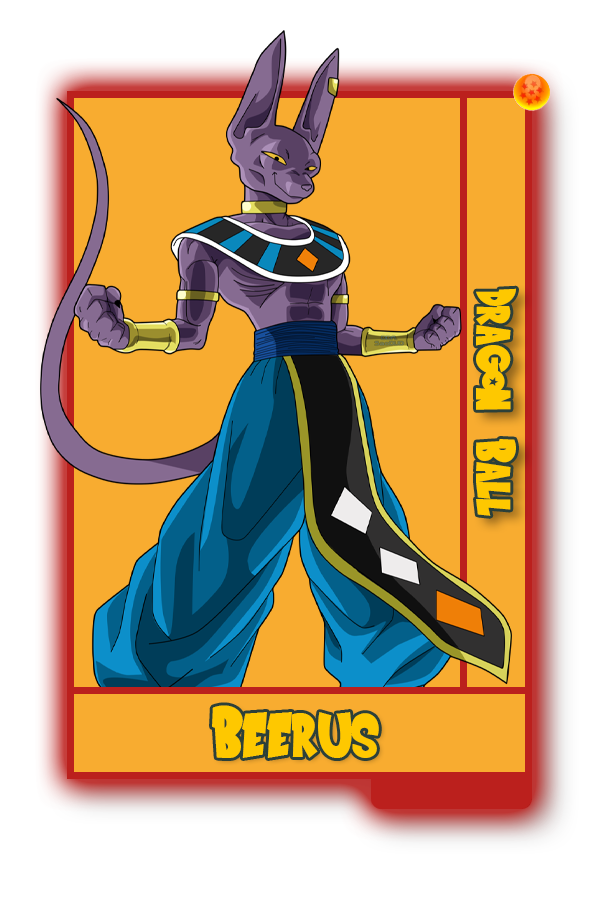
<style>
.page{position:relative;width:600px;height:900px;background:#f8ac30}
.page>*{position:absolute;margin:0}
.t1{font:56.9px "SaiyanSans";color:#fec800}
.t2{font:75px "SaiyanSans";color:#fec800}
</style>
<div class="page">
<p class="t1" style="left:476px;top:288px;width:40px;height:228px;rotate:90deg">Dragon Ball</p>
<p class="t2" style="left:212px;top:705px;width:167px;height:53px">Beerus</p>
</div>
